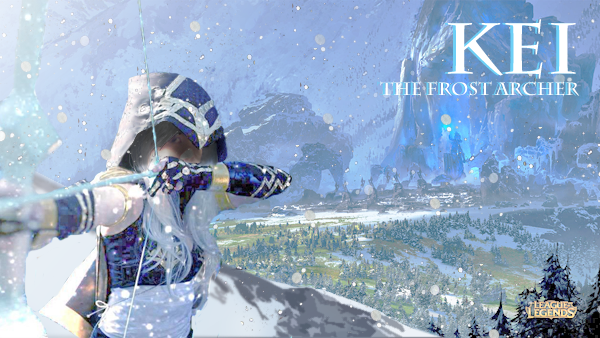
<style>
.page{position:relative;width:600px;height:338px}
.page>*{position:absolute;margin:0}
.t1{font:17.9px "CharlemagneStd-Bold"}
.t2{font:71.7px "CharlemagneStd-Bold"}
.t3{font:17.9px "CharlemagneStd-Bold";color:#ffffff}
.t4{font:71.7px "CharlemagneStd-Bold";color:#ffffff}
</style>
<div class="page">
<p class="t1" style="left:377px;top:19px;width:200px;height:78px;text-align:right"><span class="t2">KEI<br></span>The frost Archer</p>
<p class="t3" style="left:380px;top:19px;width:200px;height:78px;text-align:right"><span class="t4">KEI<br></span>The frost Archer</p>
</div>
